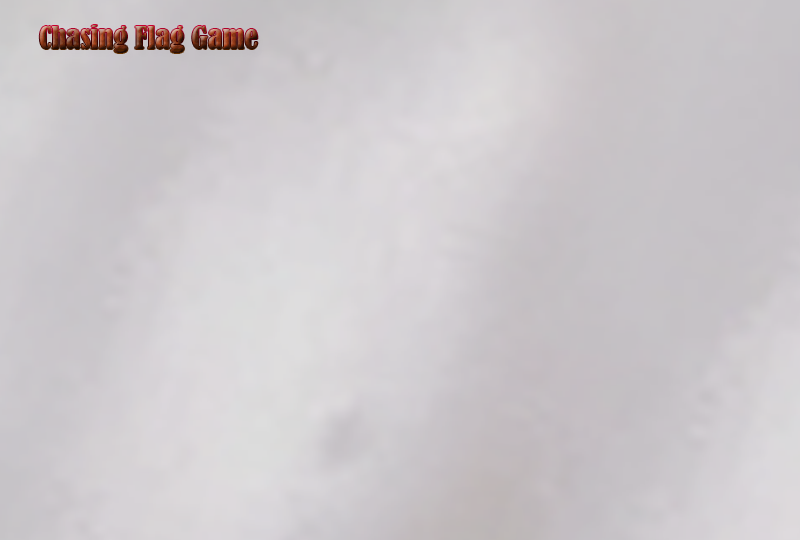
<style>
.page{position:relative;width:800px;height:540px}
.page>*{position:absolute;margin:0}
.t1{font:29.5px "BernardMT-Condensed"}
</style>
<div class="page">
<p class="t1" style="left:39px;top:25px;width:219px;height:28px">Chasing Flag Game</p>
</div>
